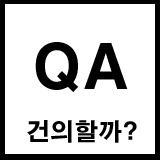
<style>
.page{position:relative;width:160px;height:160px;background:#ffffff}
.page>*{position:absolute;margin:0}
.t1{font:60px "H2gtrE";color:#000000}
.t2{font:24px "H2gtrE";color:#000000}
</style>
<div class="page">
<p class="t1" style="left:35px;top:42px;width:93px;height:50px">QA</p>
<p class="t2" style="left:27px;top:120px;width:110px;height:23px">건의할까?</p>
</div>
